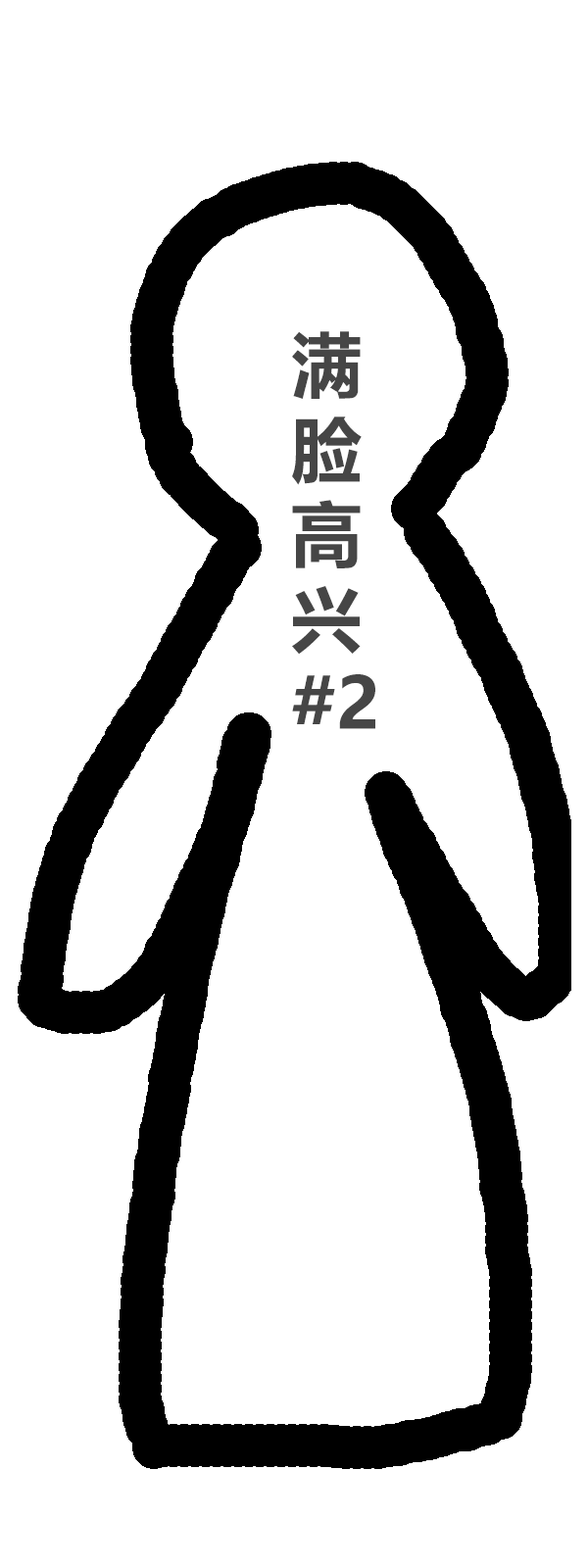
<style>
.page{position:relative;width:588px;height:1568px;background:#ffffff}
.page>*{position:absolute;margin:0}
.t1{font:70.6px "MicrosoftYaHei-Bold";color:#464646}
</style>
<div class="page">
<p class="t1" style="left:292px;top:331px;width:83px;height:398px">满<br>脸 <br>高<br>兴<br>#2</p>
</div>
